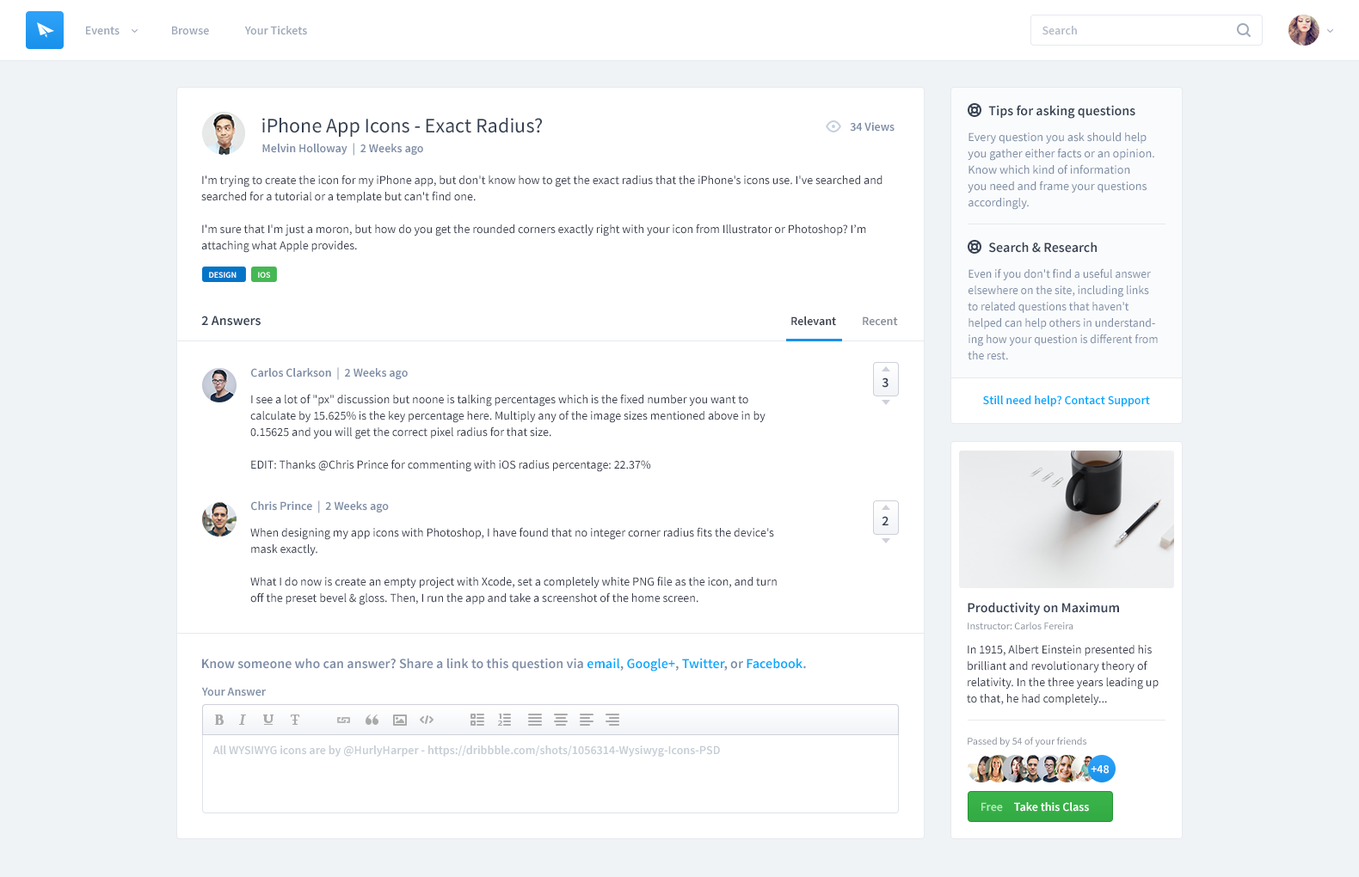
<style>
.page{position:relative;width:1359px;height:877px;background:#ffffff}
.page>*{position:absolute;margin:0}
.t1{font:12px "SourceSansPro-Semibold";color:#9fa9ba}
.t2{font:13.8px "SourceSansPro-Semibold";color:#354052}
.t3{font:20.6px "SourceSansPro-Regular";color:#354052}
.t4{font:12px "SourceSansPro-Semibold";color:#7c8ca5}
.t5{font:12px/16.3px "SourceSansPro-Regular";color:#7c8ca5}
.t6{font:12px/16.3px "SourceSansPro-Regular";color:#373d4b}
.t7{font:8.6px "SourceSansPro-Semibold";color:#ffffff;text-transform:uppercase}
.t8{font:12px "SourceSansPro-Semibold";color:#373d4b}
.t9{font:12px "SourceSansPro-Semibold";color:#848c98}
.t10{font:13.8px "SourceSansPro-Semibold";color:#354052;text-transform:uppercase}
.t11{font:12px "SourceSansPro-Semibold";color:#00aaff}
.t12{font:10.3px "SourceSansPro-Regular";color:#848c98}
.t13{font:13.8px "SourceSansPro-Semibold";color:#7c8ca5}
.t14{font:13.8px "SourceSansPro-Semibold";color:#00aaff}
.t15{font:12px "SourceSansPro-Semibold";color:#7f8fa4}
.t16{font:12px "SourceSansPro-Semibold";color:#c5ccd4}
.t17{font:12px "SourceSansPro-Semibold";color:#ffffff}
.t18{font:12px "SourceSansPro-Semibold";color:#b0edb8}
</style>
<div class="page">
<p class="t1" style="left:86px;top:26px;width:34px;height:9px">Events</p>
<p class="t1" style="left:172px;top:26px;width:37px;height:9px">Browse</p>
<p class="t1" style="left:244px;top:26px;width:63px;height:9px">Your Tickets</p>
<p class="t1" style="left:1043px;top:26px;width:34px;height:9px;opacity:0.8">Search</p>
<p class="t2" style="left:988px;top:105px;width:147px;height:14px">Tips for asking questions</p>
<p class="t3" style="left:262px;top:118px;width:280px;height:19px">iPhone App Icons - Exact Radius?</p>
<p class="t4" style="left:850px;top:122px;width:45px;height:10px">34 Views</p>
<p class="t5" style="left:968px;top:132px;width:186px;height:78px">Every question you ask should help you gather either facts or an opinion. Know which kind of information you need and frame your questions accordingly.</p>
<p class="t4" style="left:262px;top:143px;width:161px;height:13px">Melvin Holloway  |  2 Weeks ago</p>
<p class="t6" style="left:201px;top:175px;width:682px;height:78px">I'm trying to create the icon for my iPhone app, but don't know how to get the exact radius that the iPhone's icons use. I've searched and searched for a tutorial or a template but can't find one.<br><br>I'm sure that I'm just a moron, but how do you get the rounded corners exactly right with your icon from Illustrator or Photoshop? I’m attaching what Apple provides.</p>
<p class="t2" style="left:988px;top:242px;width:109px;height:11px">Search &amp; Research</p>
<p class="t5" style="left:968px;top:268px;width:190px;height:92px">Even if you don't find a useful answer elsewhere on the site, including links to related questions that haven't helped can help others in understanding how your question is different from the rest.</p>
<p class="t7" style="left:209px;top:272px;width:28px;height:6px">Design</p>
<p class="t7" style="left:258px;top:272px;width:12px;height:6px">ios</p>
<p class="t2" style="left:201px;top:316px;width:60px;height:10px">2 Answers</p>
<p class="t8" style="left:791px;top:317px;width:45px;height:9px">Relevant</p>
<p class="t9" style="left:863px;top:317px;width:35px;height:9px">Recent</p>
<p class="t4" style="left:251px;top:367px;width:157px;height:13px">Carlos Clarkson  |  2 Weeks ago</p>
<p class="t10" style="left:882px;top:378px;width:7px;height:10px">3</p>
<p class="t6" style="left:250px;top:394px;width:516px;height:78px">I see a lot of "px" discussion but noone is talking percentages which is the fixed number you want to calculate by 15.625% is the key percentage here. Multiply any of the image sizes mentioned above in by 0.15625 and you will get the correct pixel radius for that size.<br><br>EDIT: Thanks @Chris Prince for commenting with iOS radius percentage: 22.37%</p>
<p class="t11" style="left:983px;top:396px;width:167px;height:11px">Still need help? Contact Support</p>
<p class="t4" style="left:251px;top:501px;width:138px;height:13px">Chris Prince  |  2 Weeks ago</p>
<p class="t10" style="left:882px;top:516px;width:7px;height:10px">2</p>
<p class="t6" style="left:250px;top:527px;width:527px;height:79px">When designing my app icons with Photoshop, I have found that no integer corner radius fits the device's mask exactly.<br><br>What I do now is create an empty project with Xcode, set a completely white PNG file as the icon, and turn off the preset bevel &amp; gloss. Then, I run the app and take a screenshot of the home screen.</p>
<p class="t2" style="left:968px;top:602px;width:151px;height:14px">Productivity on Maximum</p>
<p class="t12" style="left:968px;top:622px;width:106px;height:8px">Instructor: Carlos Fereira</p>
<p class="t6" style="left:967px;top:645px;width:192px;height:60px">In 1915, Albert Einstein presented his brilliant and revolutionary theory of relativity. In the three years leading up to that, he had completely...</p>
<p class="t13" style="left:202px;top:658px;width:604px;height:14px">Know someone who can answer? Share a link to this question via <span class="t14">email</span>, <span class="t14">Google+</span>, <span class="t14">Twitter</span>, or <span class="t14">Facebook</span>.</p>
<p class="t15" style="left:201px;top:687px;width:65px;height:10px">Your Answer</p>
<p class="t12" style="left:968px;top:737px;width:119px;height:10px">Passed by 54 of your friends</p>
<p class="t16" style="left:212px;top:746px;width:508px;height:11px">All WYSIWYG icons are by @HurlyHarper - https://dribbble.com/shots/1056314-Wysiwyg-Icons-PSD</p>
<p class="t17" style="left:1091px;top:766px;width:18px;height:8px">+48</p>
<p class="t18" style="left:981px;top:803px;width:22px;height:9px">Free</p>
<p class="t17" style="left:1014px;top:803px;width:75px;height:9px">Take this Class</p>
</div>
